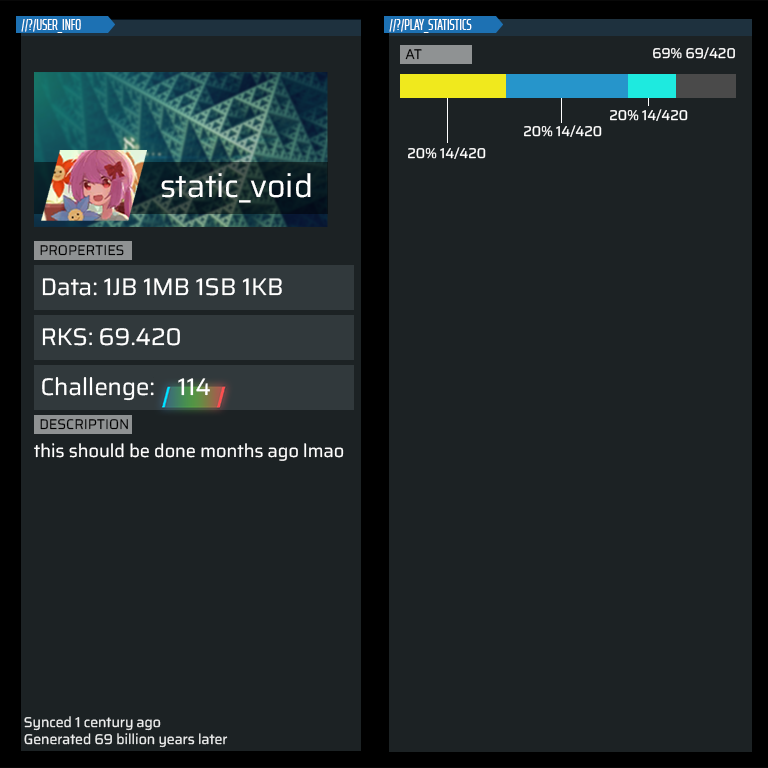
<style>
.page{position:relative;width:768px;height:768px;background:#1c2224}
.page>*{position:absolute;margin:0}
.t1{font:14px "SairaExtraCondensed-Regular";color:#ffffff}
.t2{font:14px "Saira-Regular";color:#000000}
.t3{font:14px "Saira-Regular";color:#ffffff}
.t4{font:32px "Saira-Regular";color:#ffffff}
.t5{font:24px "Saira-Regular";color:#ffffff}
.t6{font:18px "Saira-Regular";color:#ffffff}
.t7{font:14px "Saira-Regular";color:#edeeee}
</style>
<div class="page">
<p class="t1" style="left:21px;top:19px;width:60px;height:14px">//?/USER_INFO</p>
<p class="t1" style="left:389px;top:19px;width:83px;height:14px">//?/PLAY_STATISTICS</p>
<p class="t2" style="left:405px;top:49px;width:17px;height:11px">AT</p>
<p class="t3" style="left:653px;top:47px;width:82px;height:12px">69% 69/420</p>
<p class="t3" style="left:610px;top:109px;width:78px;height:12px">20% 14/420</p>
<p class="t3" style="left:524px;top:125px;width:78px;height:12px">20% 14/420</p>
<p class="t3" style="left:408px;top:147px;width:78px;height:12px">20% 14/420</p>
<p class="t4" style="left:161px;top:173px;width:150px;height:30px">static_void</p>
<p class="t2" style="left:40px;top:245px;width:84px;height:11px">PROPERTIES</p>
<p class="t5" style="left:42px;top:278px;width:240px;height:18px">Data: 1JB 1MB 1SB 1KB</p>
<p class="t5" style="left:42px;top:328px;width:138px;height:18px">RKS: 69.420</p>
<p class="t5" style="left:42px;top:377px;width:168px;height:24px">Challenge:    114</p>
<p class="t2" style="left:40px;top:419px;width:88px;height:11px">DESCRIPTION</p>
<p class="t6" style="left:34px;top:443px;width:310px;height:18px">this should be done months ago lmao</p>
<p class="t7" style="left:24px;top:716px;width:204px;height:32px">Synced 1 century ago<br>Generated 69 billion years later</p>
</div>
